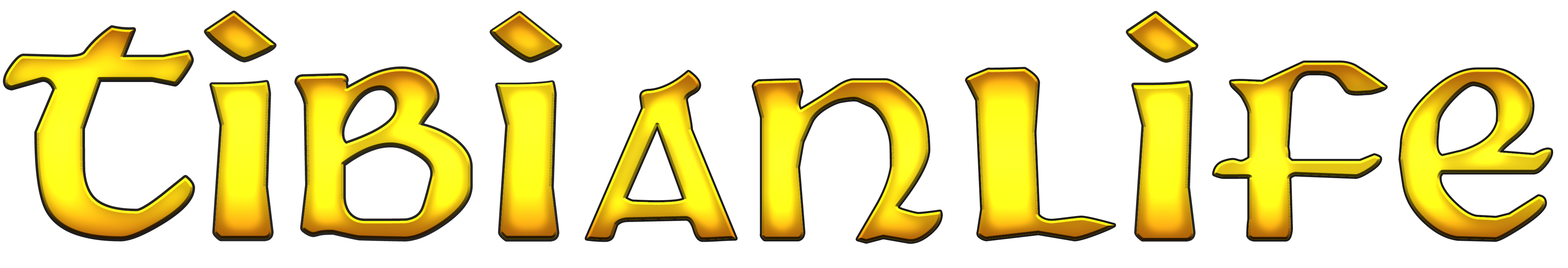
<style>
.page{position:relative;width:1568px;height:268px;background:#ffffff}
.page>*{position:absolute;margin:0}
.t1{font:342.4px "Martel";letter-spacing:0.075em;scale:1.23 1}
.t2{font:384.4px "Martel";letter-spacing:0.075em}
.t3{font:237.8px "Martel";letter-spacing:0.075em;scale:1.48 1}
.t4{font:336.3px "Martel";letter-spacing:0.075em;scale:1.06 1}
.t5{font:317px "Martel";letter-spacing:0.075em;scale:1.04 1}
.t6{font:242.9px "Martel";letter-spacing:0.075em;scale:2.08 1}
.t7{font:344px "Martel";letter-spacing:0.075em;scale:0.91 1}
.t8{font:344.2px "Martel";letter-spacing:0.075em;scale:0.96 1}
</style>
<div class="page">
<p class="t1" style="left:206px;top:13px;width:68px;height:226px">i</p>
<p class="t1" style="left:206px;top:12px;width:68px;height:227px">i</p>
<p class="t1" style="left:492px;top:13px;width:68px;height:227px">i</p>
<p class="t1" style="left:492px;top:12px;width:68px;height:227px">i</p>
<p class="t1" style="left:1128px;top:13px;width:68px;height:227px">i</p>
<p class="t1" style="left:1128px;top:15px;width:68px;height:226px">i</p>
<p class="t2" style="left:5px;top:28px;width:188px;height:211px">t</p>
<p class="t2" style="left:5px;top:28px;width:188px;height:211px">t</p>
<p class="t3" style="left:1214px;top:63px;width:172px;height:177px">f</p>
<p class="t3" style="left:1214px;top:63px;width:172px;height:177px">f</p>
<p class="t4" style="left:297px;top:69px;width:174px;height:170px">b</p>
<p class="t4" style="left:297px;top:69px;width:174px;height:170px">b</p>
<p class="t5" style="left:587px;top:72px;width:149px;height:168px">a</p>
<p class="t5" style="left:587px;top:72px;width:149px;height:168px">a</p>
<p class="t6" style="left:967px;top:69px;width:147px;height:171px">l</p>
<p class="t6" style="left:967px;top:69px;width:147px;height:171px">l</p>
<p class="t7" style="left:1401px;top:69px;width:150px;height:171px">e</p>
<p class="t7" style="left:1401px;top:69px;width:150px;height:171px">e</p>
<p class="t8" style="left:754px;top:80px;width:187px;height:162px">n</p>
<p class="t8" style="left:754px;top:80px;width:187px;height:162px">n</p>
</div>
